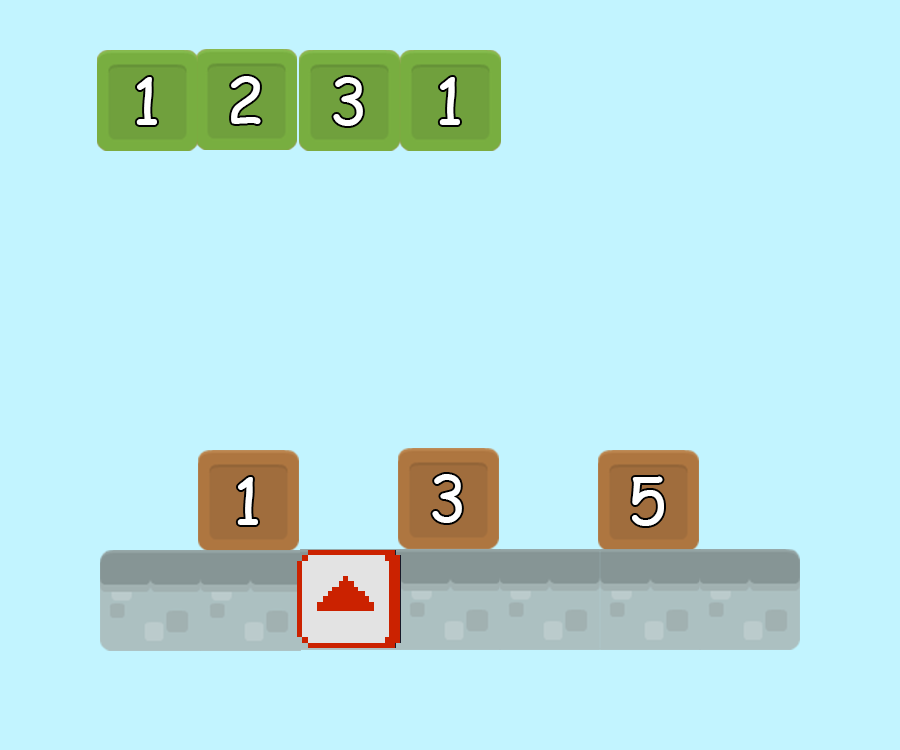
<style>
.page{position:relative;width:900px;height:750px;background:#c2f4ff}
.page>*{position:absolute;margin:0}
.t1{font:64.4px "ComicSansMS";color:#ffffff}
</style>
<div class="page">
<p class="t1" style="left:136px;top:77px;width:21px;height:48px">1</p>
<p class="t1" style="left:231px;top:76px;width:30px;height:48px">2</p>
<p class="t1" style="left:333px;top:77px;width:30px;height:49px">3</p>
<p class="t1" style="left:439px;top:77px;width:21px;height:48px">1</p>
<p class="t1" style="left:237px;top:477px;width:21px;height:48px">1</p>
<p class="t1" style="left:432px;top:474px;width:30px;height:49px">3</p>
<p class="t1" style="left:632px;top:476px;width:32px;height:50px">5</p>
</div>
